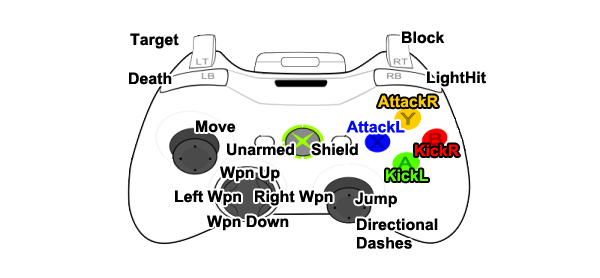
<style>
.page{position:relative;width:600px;height:278px;background:#ffffff}
.page>*{position:absolute;margin:0}
.t1{font:15.9px "Arial-BoldMT";color:#000000}
.t2{font:15.9px "Arial-BoldMT";color:#ffcc00}
.t3{font:15.9px "Arial-BoldMT";color:#0006ff}
.t4{font:15.9px "Arial-BoldMT";color:#ff0000}
.t5{font:15.9px "Arial-BoldMT";color:#54ff00}
.t6{font:15.9px/18.4px "Arial-BoldMT";color:#000000}
</style>
<div class="page">
<p class="t1" style="left:130px;top:33px;width:49px;height:16px">Target</p>
<p class="t1" style="left:402px;top:31px;width:43px;height:13px">Block</p>
<p class="t1" style="left:129px;top:72px;width:43px;height:13px">Death</p>
<p class="t1" style="left:427px;top:71px;width:59px;height:16px">LightHit</p>
<p class="t2" style="left:378px;top:95px;width:60px;height:13px">AttackR</p>
<p class="t1" style="left:196px;top:120px;width:40px;height:13px">Move</p>
<p class="t3" style="left:346px;top:120px;width:59px;height:13px">AttackL</p>
<p class="t1" style="left:227px;top:143px;width:67px;height:13px">Unarmed</p>
<p class="t1" style="left:311px;top:143px;width:47px;height:13px">Shield</p>
<p class="t4" style="left:415px;top:144px;width:44px;height:13px">KickR</p>
<p class="t1" style="left:220px;top:166px;width:60px;height:16px">Wpn Up</p>
<p class="t5" style="left:386px;top:169px;width:42px;height:13px">KickL</p>
<p class="t1" style="left:175px;top:190px;width:66px;height:16px">Left Wpn</p>
<p class="t1" style="left:255px;top:190px;width:78px;height:16px">Right Wpn</p>
<p class="t1" style="left:355px;top:192px;width:42px;height:16px">Jump</p>
<p class="t1" style="left:207px;top:215px;width:82px;height:16px">Wpn Down</p>
<p class="t6" style="left:357px;top:218px;width:81px;height:31px">Directional<br>Dashes</p>
</div>
